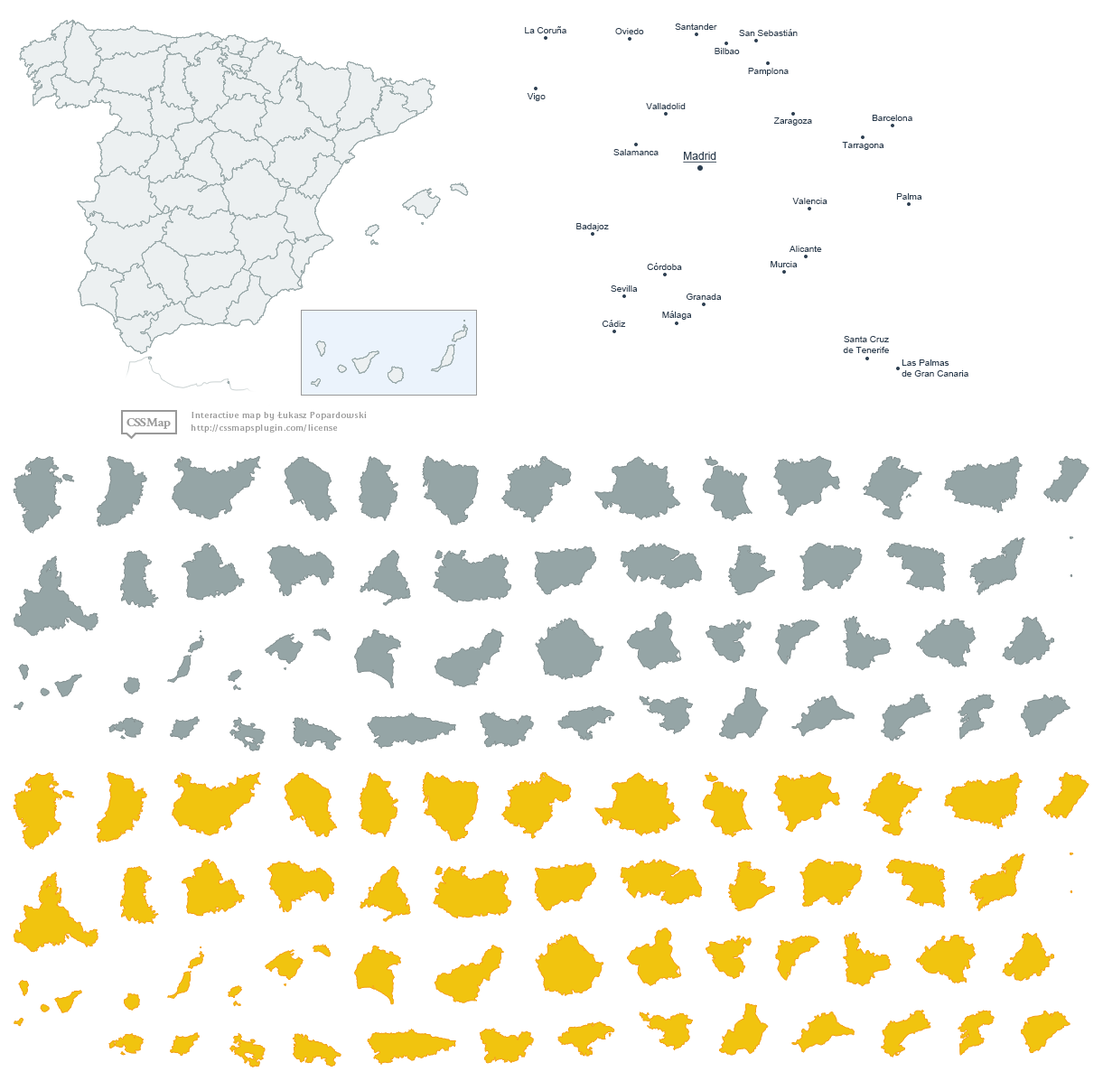
<style>
.page{position:relative;width:1103px;height:1081px;background:#ffffff}
.page>*{position:absolute;margin:0}
.t1{font:9px "ArialMT";color:#2c3e50}
.t2{font:10.8px "ArialMT";color:#2c3e50;text-decoration:underline}
</style>
<div class="page">
<p class="t1" style="left:525px;top:26px;width:41px;height:7px">La Coruña</p>
<p class="t1" style="left:615px;top:28px;width:29px;height:6px">Oviedo</p>
<p class="t1" style="left:675px;top:23px;width:42px;height:7px">Santander</p>
<p class="t1" style="left:739px;top:29px;width:59px;height:7px">San Sebastián</p>
<p class="t1" style="left:714px;top:48px;width:26px;height:6px">Bilbao</p>
<p class="t1" style="left:748px;top:68px;width:41px;height:8px">Pamplona</p>
<p class="t1" style="left:527px;top:93px;width:19px;height:8px">Vigo</p>
<p class="t1" style="left:646px;top:103px;width:40px;height:6px">Valladolid</p>
<p class="t1" style="left:773px;top:117px;width:39px;height:9px">Zaragoza</p>
<p class="t1" style="left:872px;top:115px;width:40px;height:6px">Barcelona</p>
<p class="t1" style="left:613px;top:149px;width:45px;height:6px">Salamanca</p>
<p class="t1" style="left:842px;top:142px;width:42px;height:8px">Tarragona</p>
<p class="t2" style="left:683px;top:152px;width:34px;height:11px">Madrid</p>
<p class="t1" style="left:792px;top:198px;width:35px;height:6px">Valencia</p>
<p class="t1" style="left:896px;top:193px;width:26px;height:7px">Palma</p>
<p class="t1" style="left:576px;top:223px;width:33px;height:8px">Badajoz</p>
<p class="t1" style="left:789px;top:246px;width:33px;height:6px">Alicante</p>
<p class="t1" style="left:647px;top:263px;width:35px;height:7px">Córdoba</p>
<p class="t1" style="left:770px;top:261px;width:28px;height:6px">Murcia</p>
<p class="t1" style="left:611px;top:285px;width:27px;height:7px">Sevilla</p>
<p class="t1" style="left:686px;top:294px;width:36px;height:6px">Granada</p>
<p class="t1" style="left:662px;top:311px;width:30px;height:9px">Málaga</p>
<p class="t1" style="left:602px;top:320px;width:24px;height:7px">Cádiz</p>
<p class="t1" style="left:843px;top:336px;width:46px;height:17px;text-align:center">Santa Cruz<br>de Tenerife</p>
<p class="t1" style="left:901px;top:359px;width:67px;height:18px">Las Palmas <br>de Gran Canaria</p>
</div>
